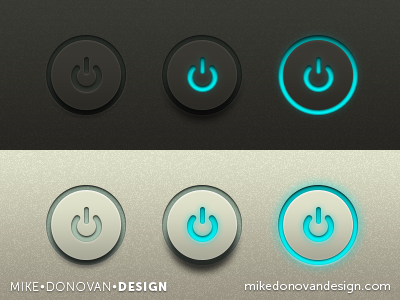
<style>
.page{position:relative;width:400px;height:300px}
.page>*{position:absolute;margin:0}
.t1{font:12px "MuseoSans-300";letter-spacing:0.031em;color:#ffffff}
.t2{font:12px "MuseoSans-100";letter-spacing:0.062em;color:#ffffff;text-transform:uppercase}
.t3{font:12px "MuseoSans-900";letter-spacing:0.062em;color:#ffffff;text-transform:uppercase}
</style>
<div class="page">
<p class="t1" style="left:245px;top:281px;width:145px;height:12px">mikedonovandesign.com</p>
<p class="t2" style="left:10px;top:282px;width:157px;height:9px">Mike•Donovan•<span class="t3">Design</span></p>
</div>
